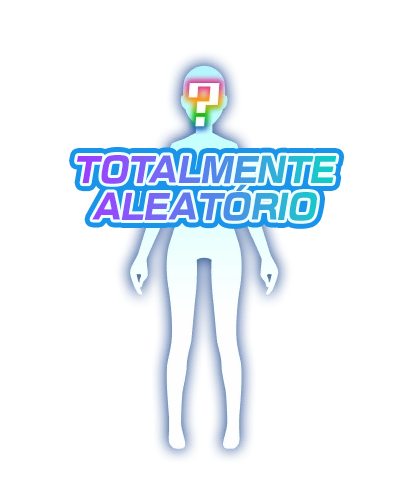
<style>
.page{position:relative;width:408px;height:494px;background:#ffffff}
.page>*{position:absolute;margin:0}
.t1{font:33.3px/37.3px "NewRodinPro-EB";font-style:italic;scale:0.95 1}
</style>
<div class="page">
<p class="t1" style="left:77px;top:155px;width:260px;height:66px;text-align:center">TOTALMENTE<br>ALEATÓRIO</p>
</div>
